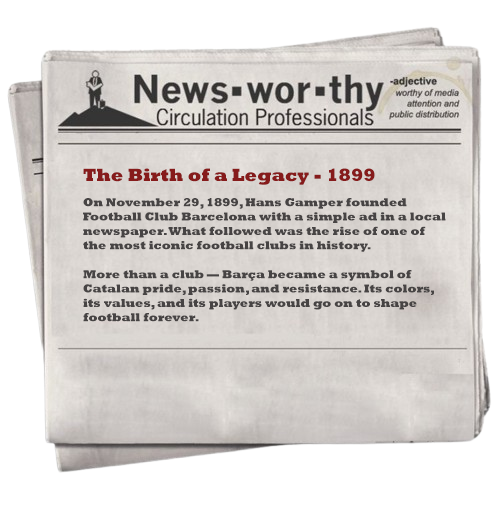
<style>
.page{position:relative;width:494px;height:505px;background:#ffffff}
.page>*{position:absolute;margin:0}
.t1{font:18px "Rockwell-ExtraBold";color:#861b1b}
.t2{font:12px "Rockwell-ExtraBold";color:#474444}
</style>
<div class="page">
<p class="t1" style="left:83px;top:168px;width:292px;height:17px">The Birth of a Legacy - 1899</p>
<p class="t2" style="left:83px;top:198px;width:363px;height:124px">On November 29, 1899, Hans Gamper founded Football Club Barcelona with a simple ad in a local newspaper. What followed was the rise of one of the most iconic football clubs in history.<br><br>More than a club — Barça became a symbol of Catalan pride, passion, and resistance. Its colors, its values, and its players would go on to shape football forever.</p>
</div>
